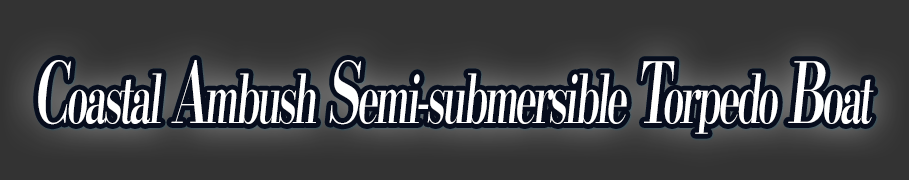
<style>
.page{position:relative;width:909px;height:180px;background:#333333}
.page>*{position:absolute;margin:0}
.t1{font:67.2px "KochoStd-Heavy";letter-spacing:-0.08em;color:#ffffff;font-style:italic;scale:0.58 1}
.t2{font:84px "KochoStd-Heavy";letter-spacing:-0.08em;color:#ffffff;font-style:italic;scale:0.58 1}
</style>
<div class="page">
<p class="t1" style="left:38px;top:60px;width:836px;height:74px"><span class="t2">C</span>oastal<span class="t2"> A</span>mbush<span class="t2"> S</span>emi-submersible<span class="t2"> T</span>orpedo<span class="t2"> B</span>oat</p>
</div>
